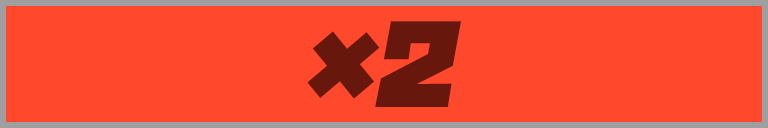
<style>
.page{position:relative;width:768px;height:128px;background:#ff482c}
.page>*{position:absolute;margin:0}
.t1{font:91.7px "GN-KMBFont-UB-NewstyleKanaA";color:#67170b;font-style:italic}
</style>
<div class="page">
<p class="t1" style="left:307px;top:21px;width:154px;height:86px">×2</p>
</div>
